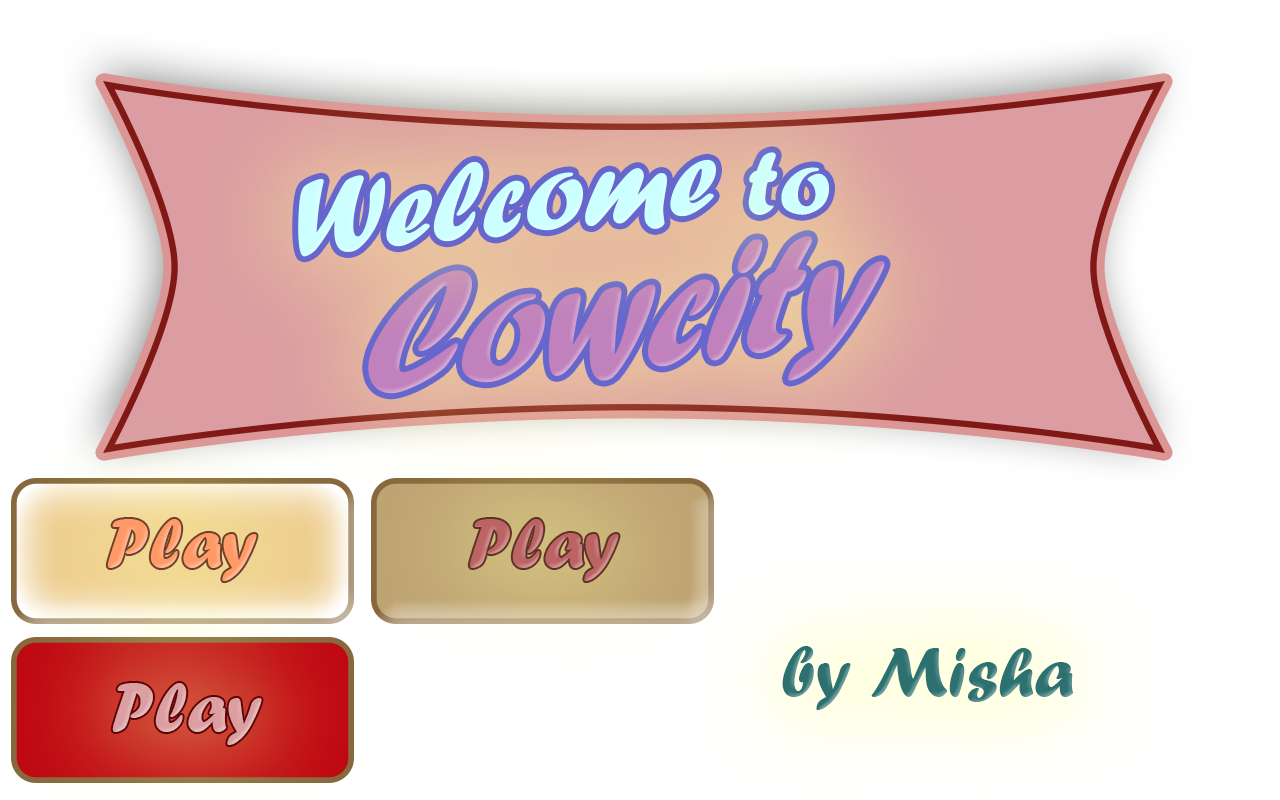
<style>
.page{position:relative;width:1280px;height:800px;background:#ffffff}
.page>*{position:absolute;margin:0}
.t1{font:114.3px "ForteMT";color:#ccffff}
.t2{font:95.8px "ForteMT";color:#ccffff}
.t3{font:180.3px "ForteMT";color:#c081bc;scale:0.86 1}
.t4{font:72px "ForteMT";color:#ff9966}
.t5{font:72px "ForteMT";color:#bc6363}
.t6{font:72px "ForteMT";color:#2c7070}
.t7{font:72px "ForteMT";color:#db9ea1}
</style>
<div class="page">
<p class="t1" style="left:298px;top:159px;width:418px;height:98px;rotate:-6deg">Welcome</p>
<p class="t2" style="left:748px;top:152px;width:81px;height:63px;rotate:-1deg">to</p>
<p class="t3" style="left:368px;top:236px;width:517px;height:158px;rotate:-6deg">Cowcity</p>
<p class="t4" style="left:107px;top:519px;width:150px;height:62px">Play</p>
<p class="t5" style="left:469px;top:519px;width:150px;height:62px">Play</p>
<p class="t6" style="left:782px;top:646px;width:292px;height:64px">by Misha</p>
<p class="t7" style="left:112px;top:683px;width:150px;height:62px">Play</p>
</div>
